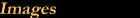
<style>
.page{position:relative;width:140px;height:18px;background:#000000}
.page>*{position:absolute;margin:0}
.t1{font:18px "Garamond-Bold";color:#fec45f;font-style:italic}
</style>
<div class="page">
<p class="t1" style="left:0px;top:2px;width:56px;height:17px">Images</p>
</div>
